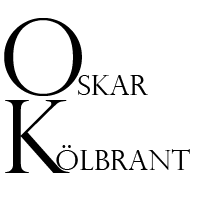
<style>
.page{position:relative;width:200px;height:200px;background:#ffffff}
.page>*{position:absolute;margin:0}
.t1{font:101.9px "PerpetuaTitlingMT-Light";color:#000000}
.t2{font:28.4px "PerpetuaTitlingMT-Light";color:#000000}
</style>
<div class="page">
<p class="t1" style="left:4px;top:18px;width:78px;height:78px">O</p>
<p class="t2" style="left:78px;top:75px;width:70px;height:20px">skar</p>
<p class="t1" style="left:5px;top:100px;width:65px;height:73px">K</p>
<p class="t2" style="left:56px;top:145px;width:134px;height:25px">ölbrant</p>
</div>
